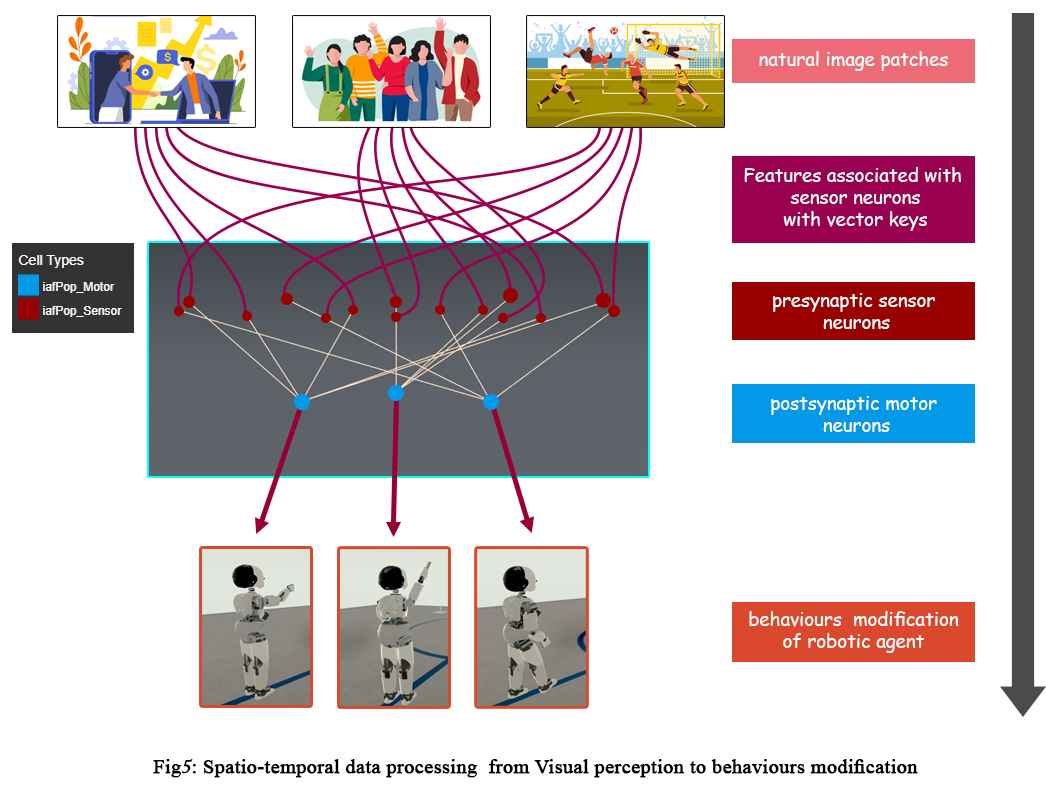
<style>
.page{position:relative;width:1046px;height:790px;background:#ffffff}
.page>*{position:absolute;margin:0}
.t1{font:18.7px "ComicSansMS";color:#ffffff}
.t2{font:20px "TimesNewRomanPSMT";color:#000000;font-weight:bold}
.t3{font:18.7px "ACaslonPro-Regular";color:#000000;font-weight:bold;font-style:italic}
</style>
<div class="page">
<p class="t1" style="left:759px;top:51px;width:189px;height:20px">natural image patches</p>
<p class="t1" style="left:744px;top:167px;width:217px;height:64px;text-align:center">Features associated with <br>sensor neurons<br>with vector keys</p>
<p class="t1" style="left:773px;top:293px;width:162px;height:36px;text-align:center">presynaptic sensor <br>neurons</p>
<p class="t1" style="left:771px;top:396px;width:166px;height:36px;text-align:center">postsynaptic motor <br>neurons</p>
<p class="t1" style="left:749px;top:611px;width:210px;height:42px;text-align:center">behaviours  modification<br>of robotic agent</p>
<p class="t2" style="left:153px;top:759px;width:765px;height:19px">Fig<span class="t3">5</span>: Spatio-temporal data processing  from Visual perception to behaviours modification</p>
</div>
